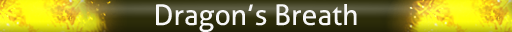
<style>
.page{position:relative;width:512px;height:32px}
.page>*{position:absolute;margin:0}
.t1{font:28.4px "Aller";color:#f7f7f7}
</style>
<div class="page">
<p class="t1" style="left:156px;top:4px;width:201px;height:28px">Dragon’s Breath</p>
</div>
